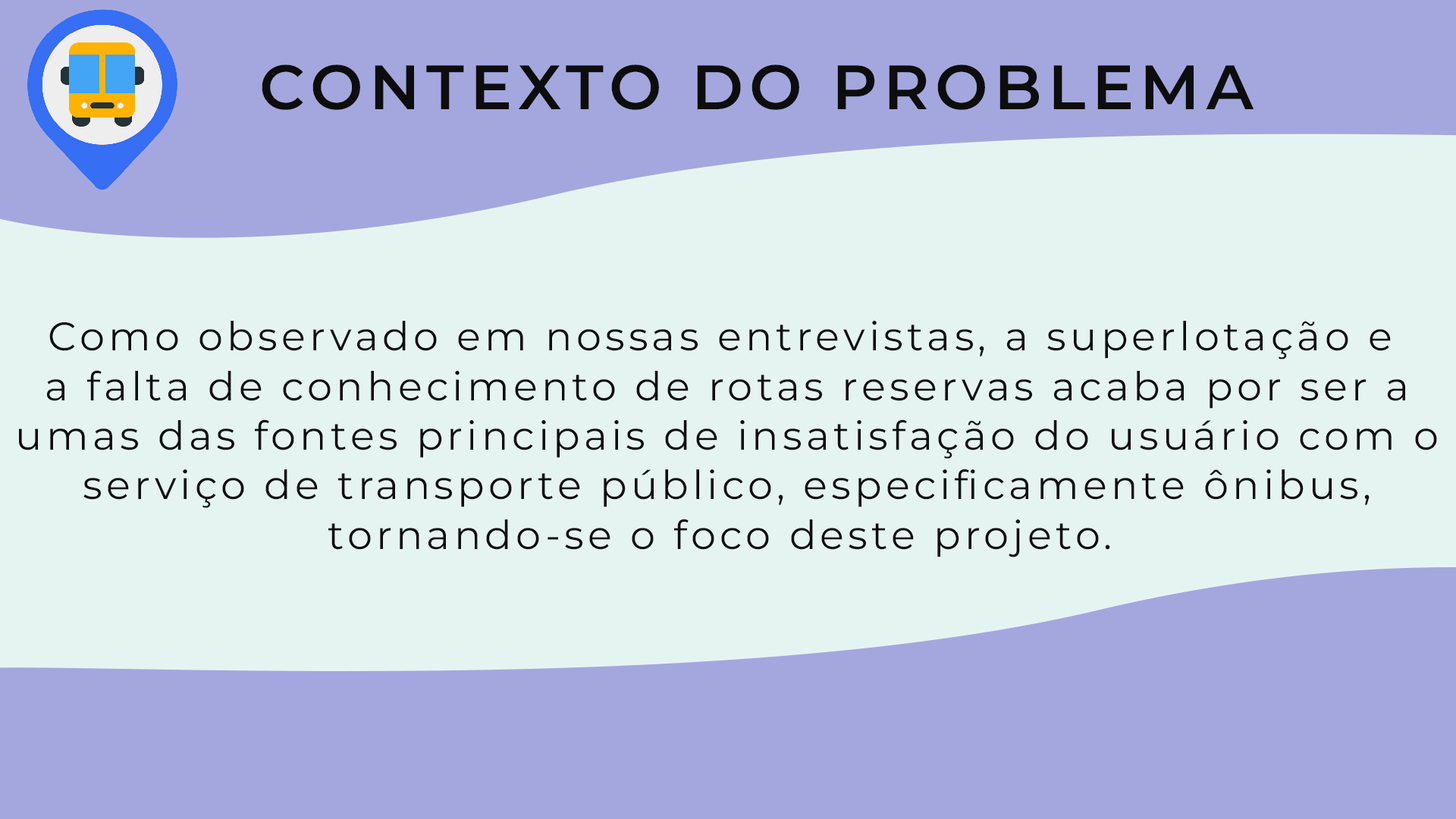
<style>
.page{position:relative;width:1456px;height:819px;background:#e6f4f1}
.page>*{position:absolute;margin:0}
.t1{font:62.6px "MontserratRoman-SemiBold";letter-spacing:0.1em;color:#0d0d0d}
.t2{font:39.8px/49.6px "MontserratRoman-Regular";letter-spacing:0.1em;color:#0d0d0d}
</style>
<div class="page">
<p class="t1" style="left:262px;top:64px;width:992px;height:46px">CONTEXTO DO PROBLEMA</p>
<p class="t2" style="left:19px;top:321px;width:1418px;height:236px;text-align:center">Como observado em nossas entrevistas, a superlotação e <br>a falta de conhecimento de rotas reservas acaba por ser a<br>umas das fontes principais de insatisfação do usuário com o<br>serviço de transporte público, especificamente ônibus,<br>tornando-se o foco deste projeto.</p>
</div>
